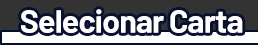
<style>
.page{position:relative;width:258px;height:45px;background:#ffffff}
.page>*{position:absolute;margin:0}
.t1{font:32px "Barlow-Bold";letter-spacing:-0.025em;color:#ffffff}
</style>
<div class="page">
<p class="t1" style="left:21px;top:9px;width:222px;height:24px">Selecionar Carta</p>
</div>
